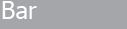
<style>
.page{position:relative;width:127px;height:29px;background:#a5a6a9}
.page>*{position:absolute;margin:0}
.t1{font:24px "Tahoma";color:#ffffff}
</style>
<div class="page">
<p class="t1" style="left:2px;top:1px;width:35px;height:18px">Bar</p>
</div>
